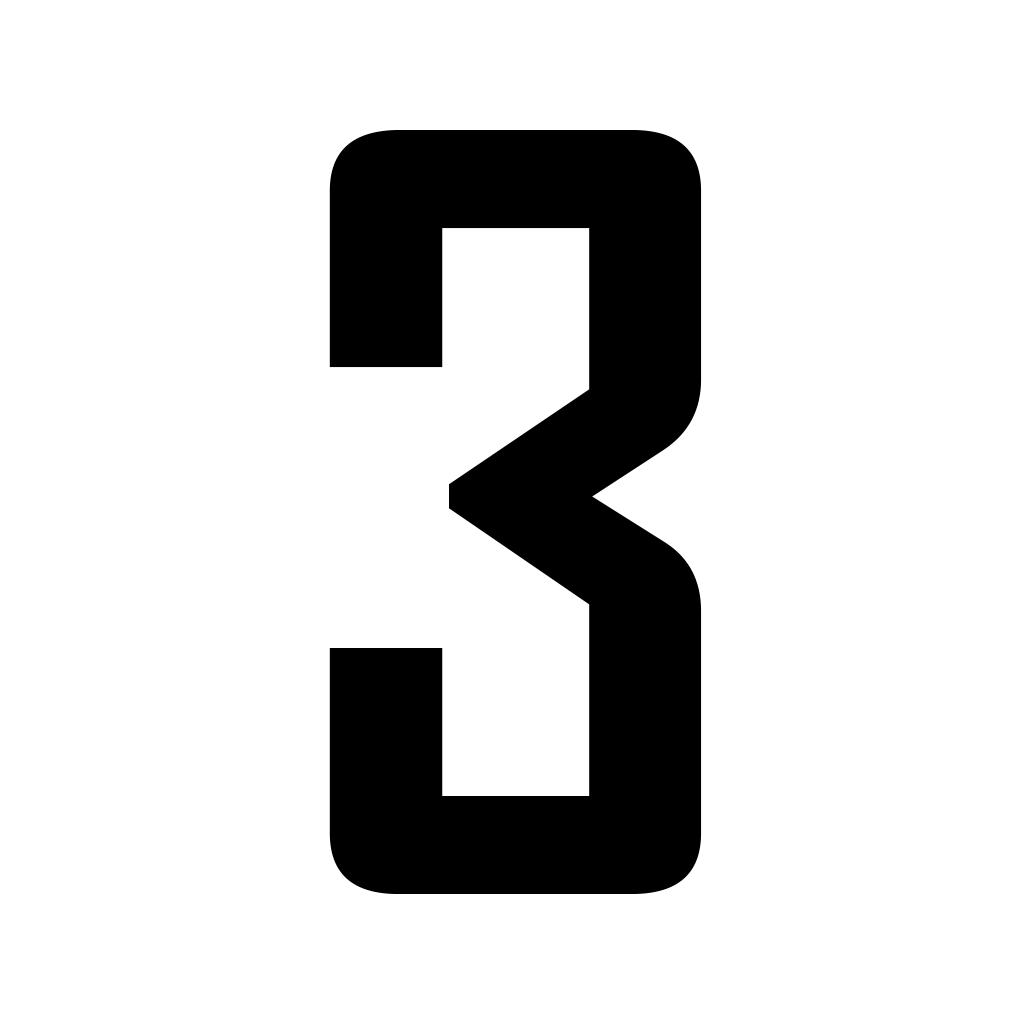
<style>
.page{position:relative;width:1024px;height:1024px;background:#ffffff}
.page>*{position:absolute;margin:0}
.t1{font:1000px "AgencyFB-Bold";color:#000000}
</style>
<div class="page">
<p class="t1" style="left:329px;top:130px;width:373px;height:764px">3</p>
</div>
